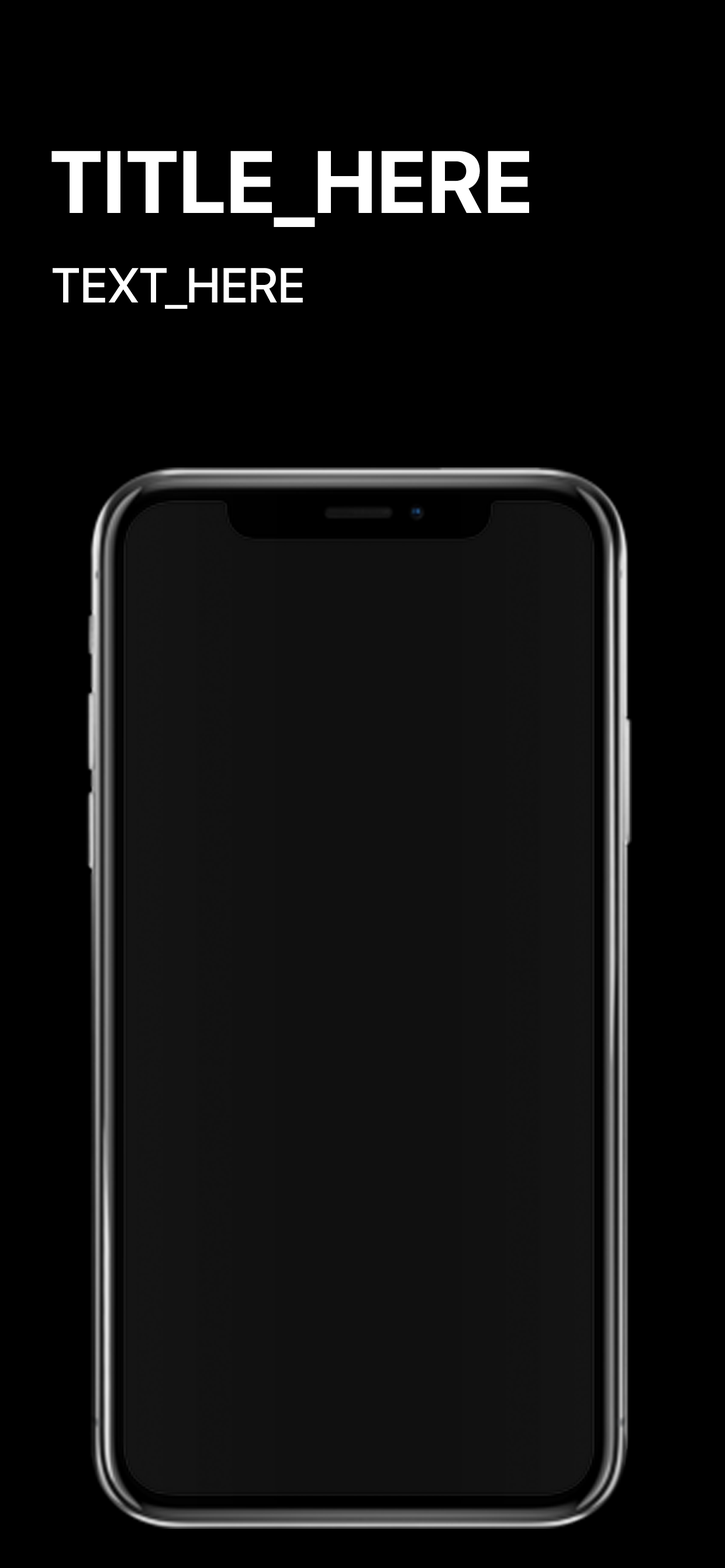
<style>
.page{position:relative;width:725px;height:1568px;background:#000000}
.page>*{position:absolute;margin:0}
.t1{font:87.8px "SFProDisplay-Bold";color:#ffffff}
.t2{font:48.8px "SFProDisplay-Medium";color:#ffffff}
</style>
<div class="page">
<p class="t1" style="left:51px;top:151px;width:478px;height:76px">TITLE_HERE</p>
<p class="t2" style="left:53px;top:268px;width:250px;height:41px">TEXT_HERE</p>
</div>
